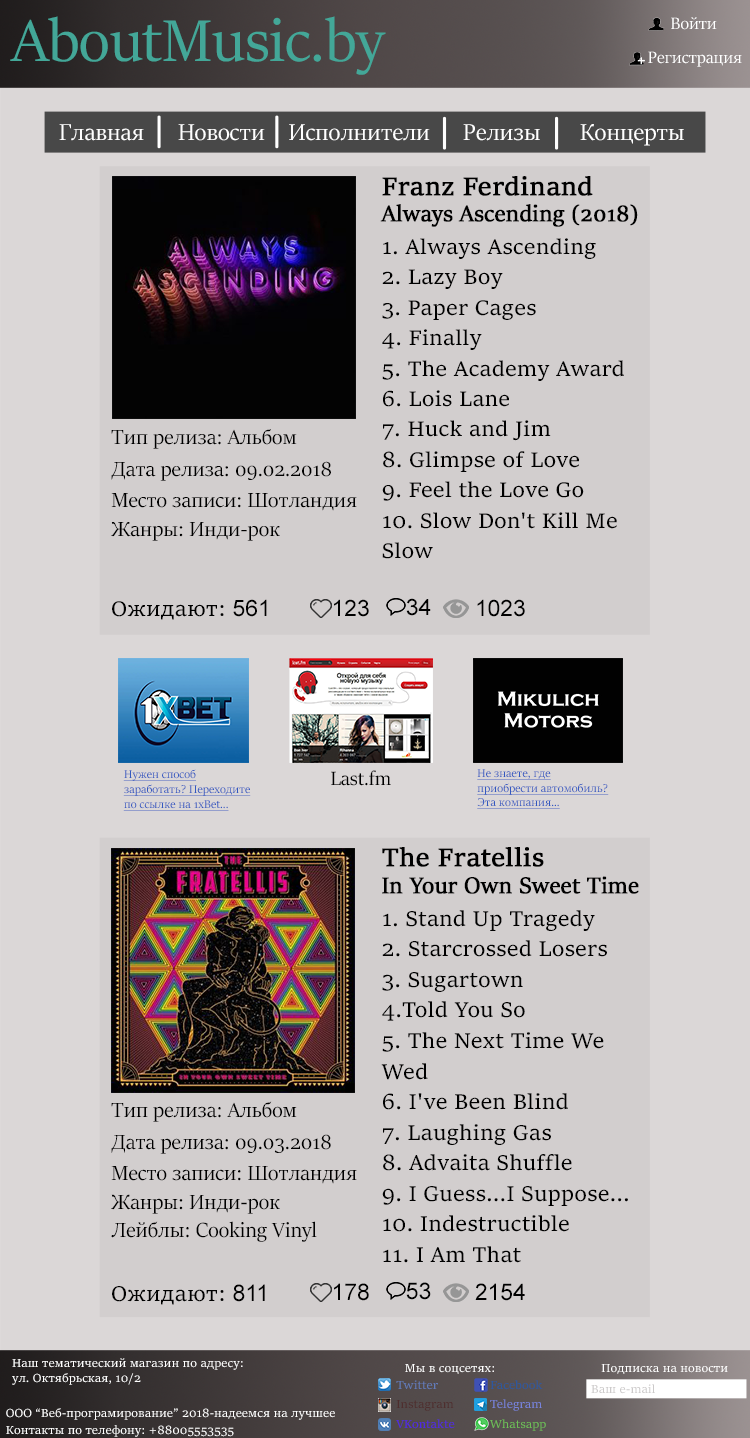
<style>
.page{position:relative;width:750px;height:1438px;background:#d2cece}
.page>*{position:absolute;margin:0}
.t1{font:66.2px "SitkaBanner";color:#43a798}
.t2{font:18.4px "SitkaBanner";color:#ffffff}
.t3{font:25.7px "SitkaBanner";color:#ffffff}
.t4{font:27.9px "SitkaSubheading";color:#000000;font-weight:bold}
.t5{font:25.3px "SitkaBanner";color:#000000;font-weight:bold}
.t6{font:22.8px/30.4px "SitkaText";color:#000000}
.t7{font:22.8px "SitkaBanner";color:#000000}
.t8{font:22.8px "SitkaText";color:#000000}
.t9{font:22.8px "ArialMT";color:#000000}
.t10{font:12.9px/14.7px "SitkaBanner";color:#3358c0;text-decoration:underline}
.t11{font:21.6px "SitkaBanner";color:#000000}
.t12{font:28px "SitkaSubheading";color:#000000;font-weight:bold}
.t13{font:25.5px "SitkaBanner";color:#000000;font-weight:bold}
.t14{font:22.9px/30.6px "SitkaText";color:#000000}
.t15{font:22.9px "SitkaBanner";color:#000000}
.t16{font:22.9px "SitkaText";color:#000000}
.t17{font:22.9px "ArialMT";color:#000000}
.t18{font:12.9px/14.7px "SitkaSubheading";color:#ffffff}
.t19{font:12.9px "SitkaSubheading";color:#ffffff}
.t20{font:12.9px "SitkaSubheading";color:#637cba}
.t21{font:12.9px "SitkaSubheading";color:#2d589e}
.t22{font:12.9px "SitkaSubheading";color:#cccaca}
.t23{font:12.9px "SitkaSubheading";color:#4e2e2e}
.t24{font:12.9px "SitkaSubheading";color:#7884dc}
.t25{font:12.9px "SitkaSubheading";color:#5027e7}
.t26{font:12.9px "SitkaSubheading";color:#6dc057}
</style>
<div class="page">
<p class="t1" style="left:10px;top:16px;width:376px;height:59px">AboutMusic.by</p>
<p class="t2" style="left:671px;top:17px;width:46px;height:13px">Войти</p>
<p class="t2" style="left:648px;top:51px;width:94px;height:16px">Регистрация</p>
<p class="t3" style="left:59px;top:124px;width:85px;height:17px">Главная</p>
<p class="t3" style="left:178px;top:124px;width:87px;height:17px">Новости</p>
<p class="t3" style="left:289px;top:124px;width:141px;height:17px">Исполнители</p>
<p class="t3" style="left:463px;top:124px;width:77px;height:17px">Релизы</p>
<p class="t3" style="left:580px;top:124px;width:104px;height:22px">Концерты</p>
<p class="t4" style="left:382px;top:176px;width:211px;height:20px">Franz Ferdinand</p>
<p class="t5" style="left:380px;top:204px;width:258px;height:23px">Always Ascending (2018)</p>
<p class="t6" style="left:382px;top:238px;width:242px;height:321px">1. Always Ascending<br>2. Lazy Boy<br>3. Paper Cages<br>4. Finally<br>5. The Academy Award<br>6. Lois Lane<br>7. Huck and Jim<br>8. Glimpse of Love<br>9. Feel the Love Go<br>10. Slow Don't Kill Me Slow</p>
<p class="t7" style="left:111px;top:429px;width:186px;height:20px">Тип релиза: Альбом</p>
<p class="t7" style="left:111px;top:461px;width:220px;height:20px">Дата релиза: 09.02.2018</p>
<p class="t7" style="left:111px;top:493px;width:246px;height:18px">Место записи: Шотландия</p>
<p class="t7" style="left:111px;top:522px;width:169px;height:19px">Жанры: Инди-рок</p>
<p class="t8" style="left:112px;top:599px;width:155px;height:21px">Ожидают: <span class="t9">561</span></p>
<p class="t9" style="left:334px;top:599px;width:35px;height:18px">123</p>
<p class="t9" style="left:406px;top:598px;width:25px;height:18px">34</p>
<p class="t9" style="left:477px;top:599px;width:48px;height:18px">1023</p>
<p class="t10" style="left:123px;top:769px;width:128px;height:42px">Нужен способ заработать? Переходите по ссылке на 1xBet...</p>
<p class="t11" style="left:331px;top:770px;width:60px;height:16px">Last.fm</p>
<p class="t10" style="left:477px;top:769px;width:132px;height:40px">Не знаете, где приобрести автомобиль? Эта компания...</p>
<p class="t12" style="left:382px;top:847px;width:162px;height:20px">The Fratellis</p>
<p class="t13" style="left:382px;top:876px;width:257px;height:18px">In Your Own Sweet Time</p>
<p class="t14" style="left:381px;top:910px;width:247px;height:353px">1. Stand Up Tragedy<br>2. Starcrossed Losers<br>3. Sugartown<br>4.Told You So<br>5. The Next Time We Wed<br>6. I've Been Blind<br>7. Laughing Gas<br>8. Advaita Shuffle<br>9. I Guess…I Suppose...<br>10. Indestructible<br>11. I Am That</p>
<p class="t15" style="left:111px;top:1101px;width:186px;height:21px">Тип релиза: Альбом</p>
<p class="t15" style="left:111px;top:1134px;width:220px;height:20px">Дата релиза: 09.03.2018</p>
<p class="t15" style="left:111px;top:1166px;width:246px;height:18px">Место записи: Шотландия</p>
<p class="t15" style="left:111px;top:1194px;width:169px;height:20px">Жанры: Инди-рок</p>
<p class="t15" style="left:111px;top:1221px;width:206px;height:21px">Лейблы: Cooking Vinyl</p>
<p class="t16" style="left:112px;top:1284px;width:153px;height:21px">Ожидают: <span class="t17">811</span></p>
<p class="t17" style="left:334px;top:1283px;width:35px;height:18px">178</p>
<p class="t17" style="left:406px;top:1282px;width:25px;height:18px">53</p>
<p class="t17" style="left:475px;top:1283px;width:50px;height:18px">2154</p>
<p class="t18" style="left:12px;top:1358px;width:231px;height:27px">Наш тематический магазин по адресу:<br>ул. Октябрьская, 10/2</p>
<p class="t19" style="left:405px;top:1364px;width:89px;height:10px">Мы в соцсетях:</p>
<p class="t19" style="left:601px;top:1364px;width:127px;height:10px">Подписка на новости</p>
<p class="t20" style="left:396px;top:1380px;width:42px;height:10px">Twitter</p>
<p class="t21" style="left:490px;top:1380px;width:53px;height:10px">Facebook</p>
<p class="t22" style="left:591px;top:1384px;width:64px;height:10px">Ваш e-mail</p>
<p class="t19" style="left:6px;top:1408px;width:329px;height:12px">ООО “Веб-програмирование” 2018-надеемся на лучшее</p>
<p class="t23" style="left:396px;top:1400px;width:58px;height:11px">Instagram</p>
<p class="t24" style="left:490px;top:1399px;width:52px;height:12px">Telegram</p>
<p class="t25" style="left:396px;top:1419px;width:59px;height:10px">VKontakte</p>
<p class="t26" style="left:490px;top:1419px;width:56px;height:12px">Whatsapp</p>
<p class="t19" style="left:6px;top:1425px;width:228px;height:12px">Контакты по телефону: +88005553535</p>
</div>
